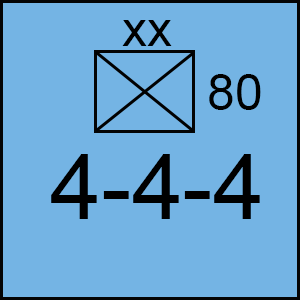
<style>
.page{position:relative;width:300px;height:300px;background:#74b4e4}
.page>*{position:absolute;margin:0}
.t1{font:50px "ArialMT";color:#000000}
.t2{font:91.7px "ArialMT";color:#000000}
</style>
<div class="page">
<p class="t1" style="left:122px;top:20px;width:50px;height:26px">xx</p>
<p class="t1" style="left:209px;top:74px;width:52px;height:36px">80</p>
<p class="t2" style="left:51px;top:154px;width:209px;height:65px">4-4-4</p>
</div>
